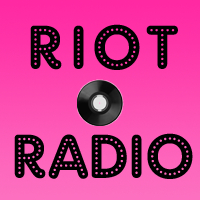
<style>
.page{position:relative;width:200px;height:200px}
.page>*{position:absolute;margin:0}
.t1{font:62.5px/108.3px "AdamGorry-Lights";color:#000000}
.t2{font:62.5px/108.3px "AdamGorry-Lights";letter-spacing:0.1em;color:#000000}
</style>
<div class="page">
<p class="t1" style="left:14px;top:24px;width:179px;height:155px;text-align:center"><span class="t2">Riot <br></span>Radio</p>
</div>
